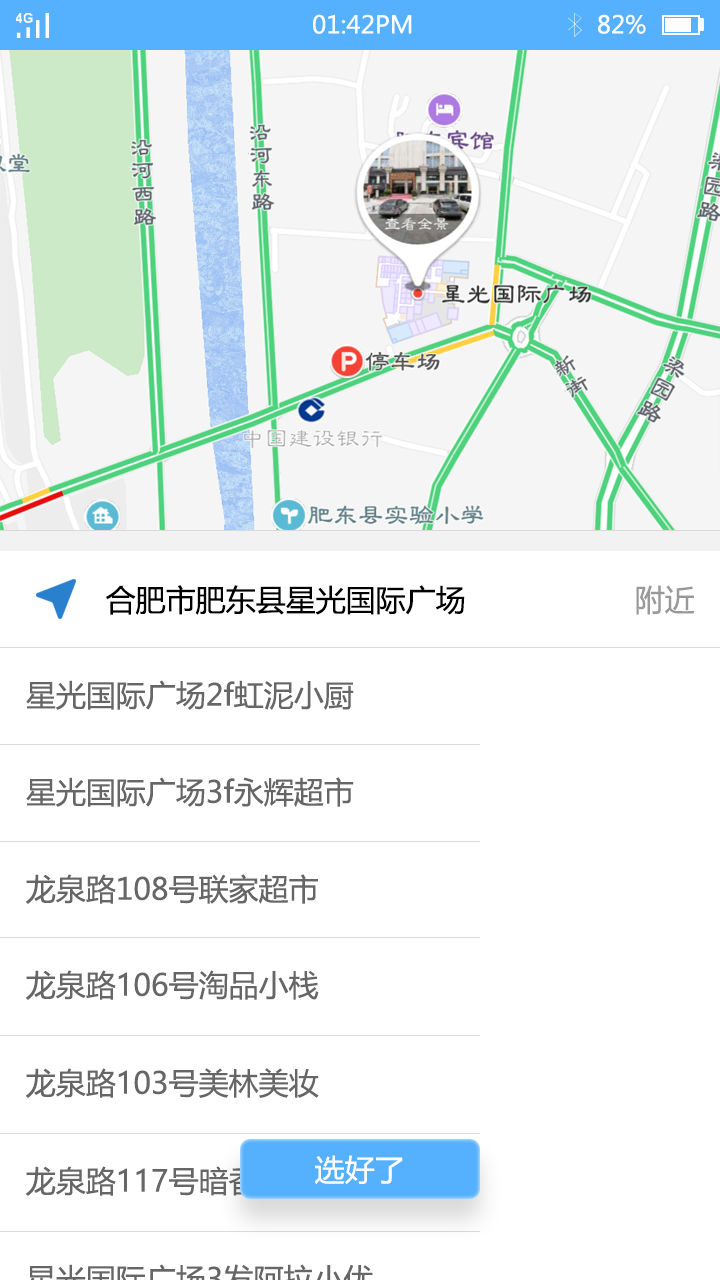
<style>
.page{position:relative;width:720px;height:1280px;background:#ffffff}
.page>*{position:absolute;margin:0}
.t1{font:24px "MicrosoftYaHei";color:#fbfdfc}
.t2{font:30px "MicrosoftYaHei";color:#000000}
.t3{font:30px "MicrosoftYaHei";color:#999999}
.t4{font:30px "MicrosoftYaHei";color:#666666}
.t5{font:30px "MicrosoftYaHei";color:#ffffff}
</style>
<div class="page">
<p class="t1" style="left:313px;top:14px;width:99px;height:20px">01:42PM</p>
<p class="t1" style="left:598px;top:14px;width:48px;height:20px">82%</p>
<p class="t2" style="left:106px;top:585px;width:359px;height:30px">合肥市肥东县星光国际广场</p>
<p class="t3" style="left:636px;top:585px;width:59px;height:30px">附近</p>
<p class="t4" style="left:26px;top:680px;width:328px;height:30px">星光国际广场2f虹泥小厨</p>
<p class="t4" style="left:26px;top:777px;width:328px;height:30px">星光国际广场3f永辉超市</p>
<p class="t4" style="left:25px;top:874px;width:293px;height:30px">龙泉路108号联家超市</p>
<p class="t4" style="left:25px;top:970px;width:294px;height:30px">龙泉路106号淘品小栈</p>
<p class="t4" style="left:25px;top:1068px;width:294px;height:30px">龙泉路103号美林美妆</p>
<p class="t5" style="left:314px;top:1155px;width:89px;height:29px">选好了</p>
<p class="t4" style="left:25px;top:1166px;width:293px;height:30px">龙泉路117号暗香咖啡</p>
</div>
